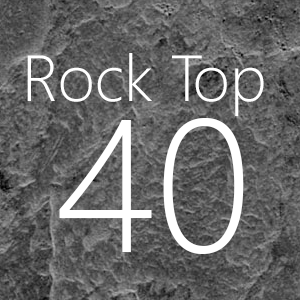
<style>
.page{position:relative;width:300px;height:300px}
.page>*{position:absolute;margin:0}
.t1{font:65px/151px "SegoeUI-Light";color:#ffffff}
.t2{font:188px/151px "SegoeUI-Light";color:#ffffff}
</style>
<div class="page">
<p class="t1" style="left:27px;top:53px;width:237px;height:201px;text-align:center">Rock Top <br><span class="t2">40</span></p>
</div>
